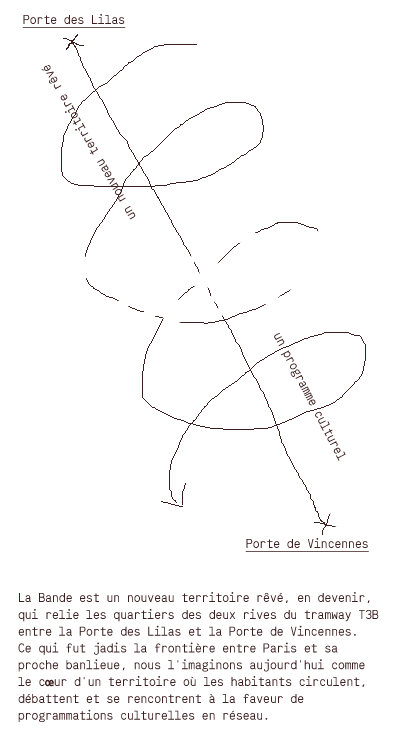
<style>
.page{position:relative;width:393px;height:735px;background:#ffffff}
.page>*{position:absolute;margin:0}
.t1{font:14px "Whois-mono";color:#3b1e1e;text-decoration:underline}
.t2{font:14px "Whois-mono";color:#3b1e1e}
.t3{font:14px "NotCourierSans-Bold";color:#3b1e1e}
</style>
<div class="page">
<p class="t1" style="left:22px;top:14px;width:104px;height:14px">Porte des Lilas</p>
<p class="t2" style="left:41px;top:65px;width:95px;height:155px;rotate:-120deg">un nouveau territoire rêvé</p>
<p class="t2" style="left:274px;top:332px;width:72px;height:129px;rotate:62deg">un programme culturel</p>
<p class="t1" style="left:245px;top:538px;width:124px;height:14px">Porte de Vincennes</p>
<p class="t2" style="left:18px;top:592px;width:361px;height:130px">La Bande est un nouveau territoire rêvé, en devenir, qui relie les quartiers des deux rives du tramway T3B entre la Porte des Lilas et la Porte de Vincennes. <br>Ce qui fut jadis la frontière entre Paris et sa proche banlieue, nous l'imaginons aujourd'hui comme le c<span class="t3">œ</span>ur d'un territoire où les habitants circulent, débattent et se rencontrent à la faveur de programmations culturelles en réseau.</p>
</div>
